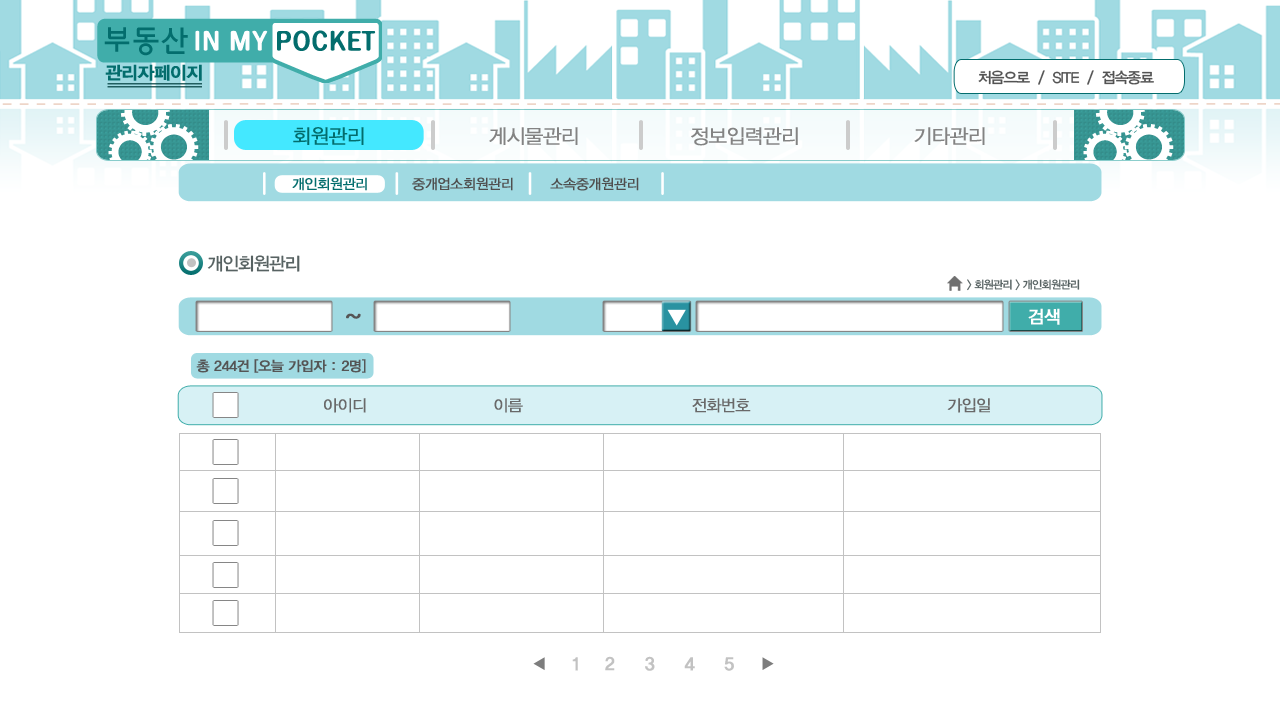
<style>
.page{position:relative;width:1280px;height:720px;background:#ffffff}
.page>*{position:absolute;margin:0}
.t1{font:17.8px "YDIYGO340";letter-spacing:-0.04em;color:#036d6d;font-weight:bold}
.t2{font:15px "YDIYGO330";letter-spacing:-0.06em;color:#535353}
.t3{font:20px "YDIYGO320";letter-spacing:-0.04em;color:#036d6d;font-weight:bold}
.t4{font:20px "YDIYGO320";letter-spacing:-0.04em;color:#838383;font-weight:bold}
.t5{font:14px "YDIYGO320";letter-spacing:-0.04em;color:#036d6d;font-weight:bold}
.t6{font:14px "YDIYGO320";letter-spacing:-0.04em;color:#4f4f4f;font-weight:bold}
.t7{font:18px "YDIYGO330";letter-spacing:-0.06em;color:#576262}
.t8{font:11px "YDIYGO330";letter-spacing:-0.06em;color:#576262}
.t9{font:23.8px "FBsky-Medium--KSCpc-EUC-H";letter-spacing:-0.04em;color:#555555;font-weight:bold}
.t10{font:17.8px "YDIYGO330";letter-spacing:-0.04em;color:#ffffff;font-weight:bold}
.t11{font:13.8px "YDIYGO330";letter-spacing:-0.04em;color:#555555;font-weight:bold}
.t12{font:16px "YDIYGO320";letter-spacing:-0.04em;color:#696969;font-weight:bold}
.t13{font:17.8px "YDIYGO340";letter-spacing:-0.04em;color:#c2c2c2;font-weight:bold}
</style>
<div class="page">
<p class="t1" style="left:105px;top:64px;width:97px;height:17px">관리자페이지</p>
<p class="t2" style="left:978px;top:70px;width:176px;height:15px">처음으로  /  SITE  /  접속종료</p>
<p class="t3" style="left:293px;top:127px;width:71px;height:18px">회원관리</p>
<p class="t4" style="left:489px;top:127px;width:89px;height:18px">게시물관리</p>
<p class="t4" style="left:691px;top:127px;width:107px;height:19px">정보입력관리</p>
<p class="t4" style="left:914px;top:127px;width:71px;height:18px">기타관리</p>
<p class="t5" style="left:292px;top:177px;width:75px;height:14px">개인회원관리</p>
<p class="t6" style="left:412px;top:177px;width:101px;height:14px">중개업소회원관리</p>
<p class="t6" style="left:550px;top:177px;width:89px;height:14px">소속중개원관리</p>
<p class="t7" style="left:207px;top:255px;width:93px;height:17px">개인회원관리</p>
<p class="t8" style="left:967px;top:279px;width:113px;height:12px">&gt; 회원관리 &gt; 개인회원관리</p>
<p class="t9" style="left:346px;top:313px;width:15px;height:6px">~</p>
<p class="t10" style="left:1028px;top:308px;width:32px;height:17px">검색</p>
<p class="t11" style="left:196px;top:359px;width:170px;height:14px">총 244건 [오늘 가입자 : 2명]</p>
<p class="t12" style="left:324px;top:398px;width:42px;height:15px">아이디</p>
<p class="t12" style="left:494px;top:398px;width:29px;height:15px">이름</p>
<p class="t12" style="left:692px;top:398px;width:59px;height:15px">전화번호</p>
<p class="t12" style="left:947px;top:398px;width:43px;height:15px">가입일</p>
<p class="t13" style="left:572px;top:656px;width:162px;height:15px">1    2     3     4     5</p>
</div>
